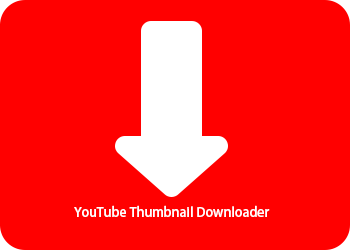
<style>
.page{position:relative;width:350px;height:250px;background:#ff0000}
.page>*{position:absolute;margin:0}
.t1{font:13px "AdobeFanHeitiStd-Bold";color:#ffffff}
</style>
<div class="page">
<p class="t1" style="left:74px;top:205px;width:196px;height:12px">YouTube Thumbnail Downloader</p>
</div>
